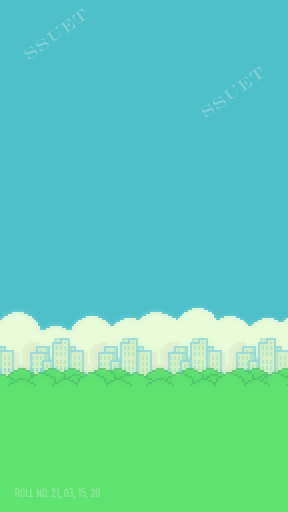
<style>
.page{position:relative;width:288px;height:512px;background:#4ec0ca}
.page>*{position:absolute;margin:0}
.t1{font:16px "EngraversMT";letter-spacing:0.1em;color:#7ecfd7}
.t2{font:12px "Bahnschrift-Condensed";color:#85e892}
</style>
<div class="page">
<p class="t1" style="left:24px;top:8px;width:64px;height:53px;rotate:-36deg">SSUET</p>
<p class="t1" style="left:201px;top:66px;width:64px;height:53px;rotate:-36deg">SSUET</p>
<p class="t2" style="left:15px;top:488px;width:85px;height:11px">ROLL NO: 21, 03, 15, 20</p>
</div>
